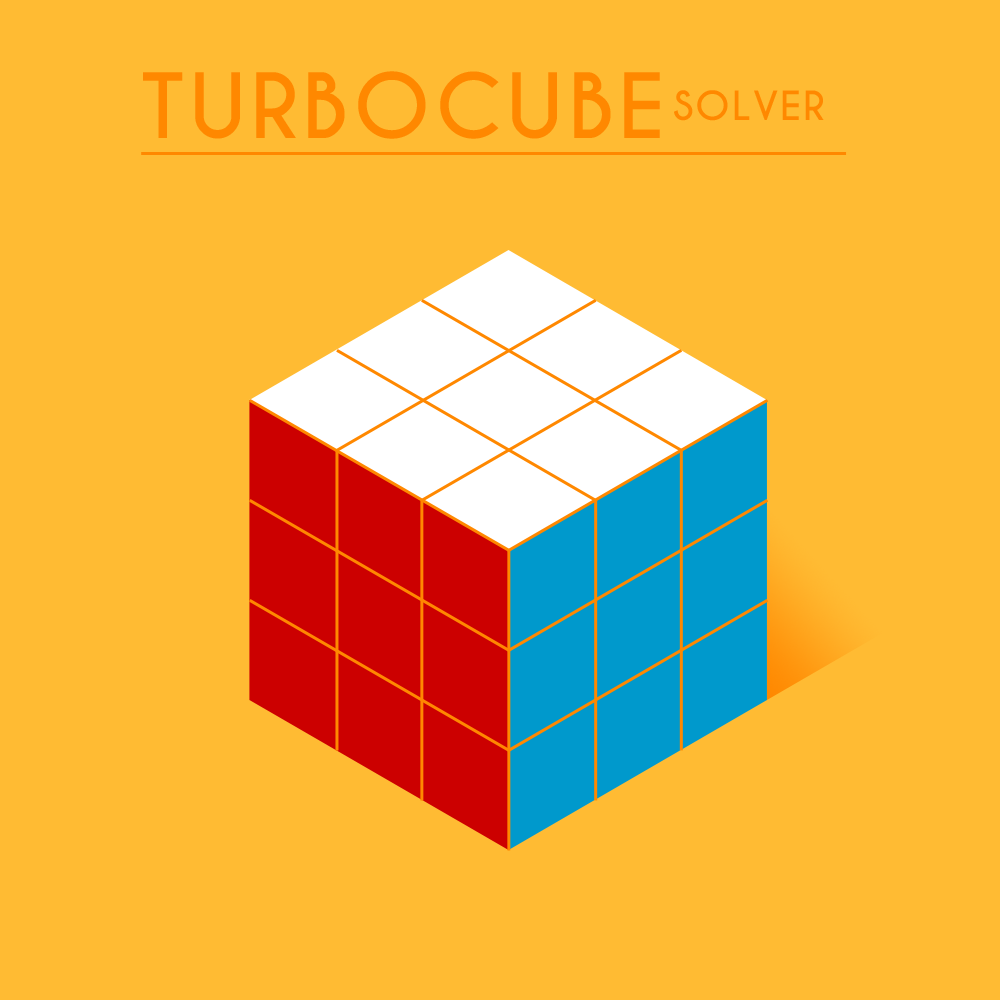
<style>
.page{position:relative;width:1000px;height:1000px;background:#ffbb33}
.page>*{position:absolute;margin:0}
.t1{font:84.2px "CaviarDreams-Bold";letter-spacing:0.05em;color:#ff8800}
.t2{font:37.7px "CaviarDreams-Bold";letter-spacing:0.05em;color:#ff8800}
</style>
<div class="page">
<p class="t1" style="left:143px;top:71px;width:517px;height:68px">TURBOCUBE</p>
<p class="t2" style="left:674px;top:90px;width:150px;height:31px">SOLVER</p>
</div>
